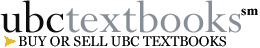
<style>
.page{position:relative;width:260px;height:48px;background:#ffffff}
.page>*{position:absolute;margin:0}
.t1{font:50px "Perpetua";color:#868f98}
.t2{font:50px "Perpetua";color:#0d0d0d}
.t3{font:14px "TimesNewRomanPS-BoldMT";color:#070706}
.t4{font:14px "Georgia";color:#060605}
</style>
<div class="page">
<p class="t1" style="left:0px;top:0px;width:241px;height:33px"><span class="t2">ubc</span>textbooks</p>
<p class="t3" style="left:241px;top:8px;width:17px;height:8px">sm</p>
<p class="t4" style="left:18px;top:36px;width:208px;height:11px">BUY OR SELL UBC TEXTBOOKS</p>
</div>
